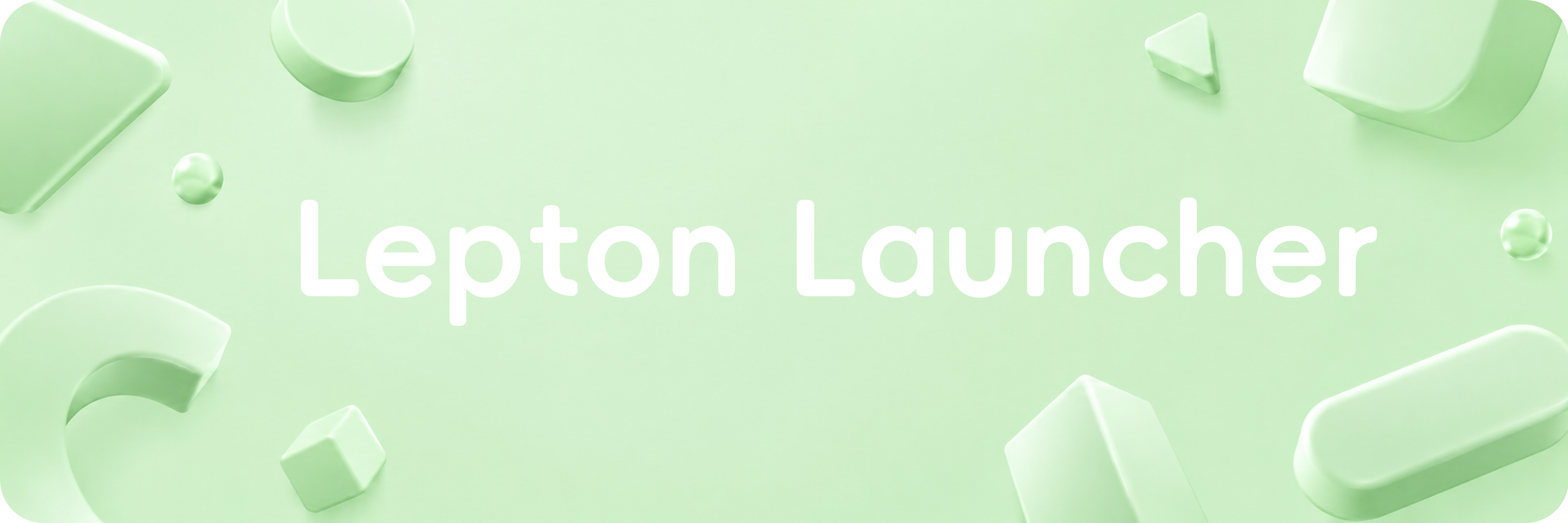
<style>
.page{position:relative;width:1568px;height:523px}
.page>*{position:absolute;margin:0}
.t1{font:129.9px "AlimamaFangYuanTi-Bold";color:#ffffff}
</style>
<div class="page">
<p class="t1" style="left:300px;top:197px;width:1077px;height:129px">Lepton Launcher</p>
</div>
